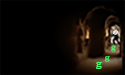
<style>
.page{position:relative;width:125px;height:75px;background:#000000}
.page>*{position:absolute;margin:0}
.t1{font:5.7px "MyriadPro-Regular";scale:1.19 1}
.t2{font:6.9px "LucidaBright";color:#36ff6a;scale:1.3 1}
.t3{font:8.6px "LucidaBright";color:#36ff6a;scale:1.3 1}
.t4{font:7.1px "LucidaBright";color:#36ff6a;scale:1.3 1}
</style>
<div class="page">
<p class="t1" style="left:112px;top:30px;width:7px;height:5px">@</p>
<p class="t2" style="left:111px;top:46px;width:5px;height:6px">g</p>
<p class="t3" style="left:96px;top:62px;width:6px;height:7px">g</p>
<p class="t4" style="left:104px;top:56px;width:6px;height:6px">g</p>
</div>
